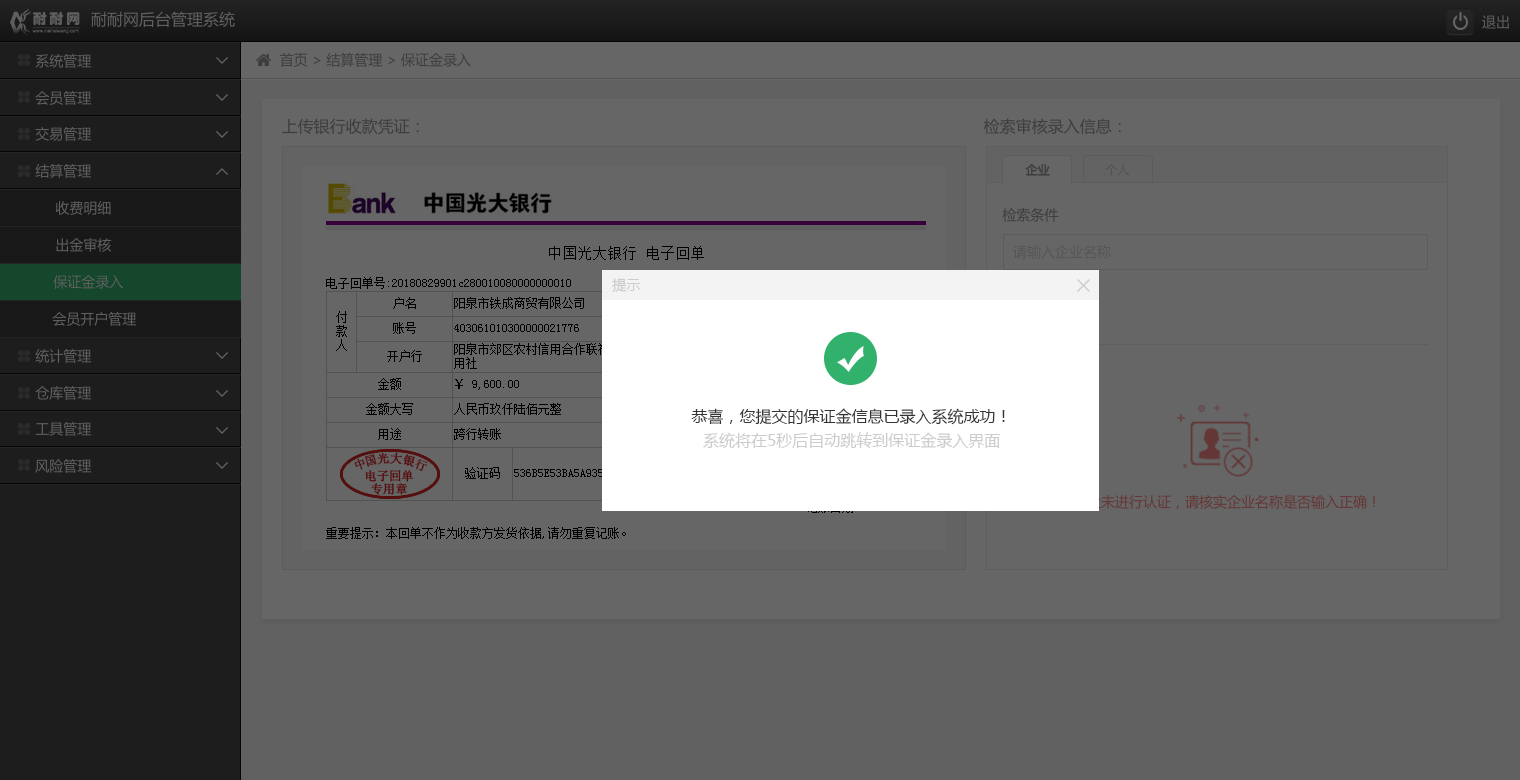
<style>
.page{position:relative;width:1520px;height:780px;background:#666666}
.page>*{position:absolute;margin:0}
.t1{font:16px "MicrosoftYaHei";color:#606060}
.t2{font:14px "MicrosoftYaHei";color:#606060}
.t3{font:14px "MicrosoftYaHei";color:#3d3d3d}
.t4{font:16px "MicrosoftYaHei";color:#3d3d3d}
.t5{font:12px "MicrosoftYaHei";color:#3d3d3d;font-weight:bold}
.t6{font:12px "MicrosoftYaHei";color:#525252}
.t7{font:14px "MicrosoftYaHei";color:#565656}
.t8{font:14px "MicrosoftYaHei";color:#cccccc}
.t9{font:16px/18px "MicrosoftYaHei";color:#333333}
.t10{font:16px/24px "MicrosoftYaHei";color:#cccccc}
</style>
<div class="page">
<p class="t1" style="left:91px;top:11px;width:144px;height:17px">耐耐网后台管理系统</p>
<p class="t2" style="left:1482px;top:15px;width:27px;height:14px">退出</p>
<p class="t2" style="left:35px;top:54px;width:57px;height:14px">系统管理</p>
<p class="t3" style="left:280px;top:53px;width:191px;height:14px">首页 &gt; 结算管理 &gt; 保证金录入</p>
<p class="t2" style="left:35px;top:91px;width:57px;height:14px">会员管理</p>
<p class="t4" style="left:282px;top:118px;width:137px;height:17px">上传银行收款凭证：</p>
<p class="t4" style="left:983px;top:118px;width:138px;height:17px">检索审核录入信息：</p>
<p class="t2" style="left:35px;top:127px;width:57px;height:14px">交易管理</p>
<p class="t2" style="left:35px;top:164px;width:57px;height:14px">结算管理</p>
<p class="t5" style="left:1025px;top:164px;width:25px;height:12px">企业</p>
<p class="t6" style="left:1105px;top:164px;width:24px;height:12px">个人</p>
<p class="t2" style="left:55px;top:201px;width:56px;height:14px">收费明细</p>
<p class="t3" style="left:1002px;top:208px;width:57px;height:14px">检索条件</p>
<p class="t2" style="left:56px;top:238px;width:56px;height:14px">出金审核</p>
<p class="t7" style="left:1013px;top:245px;width:98px;height:14px">请输入企业名称</p>
<p class="t2" style="left:53px;top:275px;width:70px;height:14px">保证金录入</p>
<p class="t8" style="left:612px;top:278px;width:29px;height:14px">提示</p>
<p class="t2" style="left:52px;top:312px;width:85px;height:14px">会员开户管理</p>
<p class="t2" style="left:35px;top:349px;width:57px;height:14px">统计管理</p>
<p class="t2" style="left:35px;top:386px;width:57px;height:14px">仓库管理</p>
<p class="t9" style="left:691px;top:408px;width:314px;height:41px;text-align:center">恭喜，您提交的保证金信息已录入系统成功！<br><span class="t10">系统将在5秒后自动跳转到保证金录入界面</span></p>
<p class="t2" style="left:35px;top:422px;width:57px;height:14px">工具管理</p>
<p class="t2" style="left:35px;top:459px;width:57px;height:14px">风险管理</p>
</div>
